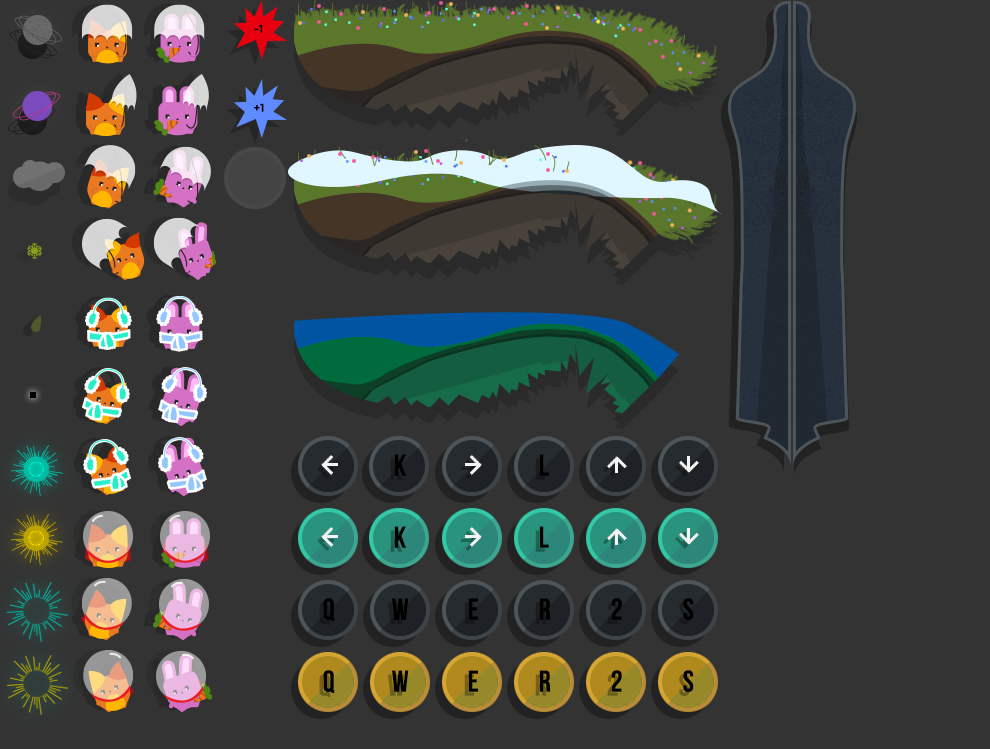
<style>
.page{position:relative;width:990px;height:749px;background:#333333}
.page>*{position:absolute;margin:0}
.t1{font:11px "Montserrat-Bold";color:#000000;text-transform:uppercase}
.t2{font:30px "BebasNeueBold";letter-spacing:0.198em;color:#000000;text-transform:uppercase}
</style>
<div class="page">
<p class="t1" style="left:254px;top:24px;width:9px;height:9px">-1</p>
<p class="t1" style="left:254px;top:103px;width:10px;height:9px">+1</p>
<p class="t2" style="left:394px;top:454px;width:12px;height:22px">K</p>
<p class="t2" style="left:539px;top:454px;width:10px;height:22px">L</p>
<p class="t2" style="left:394px;top:526px;width:12px;height:22px">K</p>
<p class="t2" style="left:539px;top:526px;width:10px;height:22px">L</p>
<p class="t2" style="left:323px;top:598px;width:12px;height:23px">Q</p>
<p class="t2" style="left:392px;top:598px;width:17px;height:22px">W</p>
<p class="t2" style="left:468px;top:598px;width:10px;height:22px">E</p>
<p class="t2" style="left:539px;top:598px;width:12px;height:22px">R</p>
<p class="t2" style="left:611px;top:598px;width:11px;height:22px">2</p>
<p class="t2" style="left:683px;top:598px;width:11px;height:22px">S</p>
<p class="t2" style="left:323px;top:670px;width:12px;height:23px">Q</p>
<p class="t2" style="left:392px;top:670px;width:17px;height:22px">W</p>
<p class="t2" style="left:468px;top:670px;width:10px;height:22px">E</p>
<p class="t2" style="left:539px;top:670px;width:12px;height:22px">R</p>
<p class="t2" style="left:611px;top:670px;width:11px;height:22px">2</p>
<p class="t2" style="left:683px;top:670px;width:11px;height:22px">S</p>
</div>
